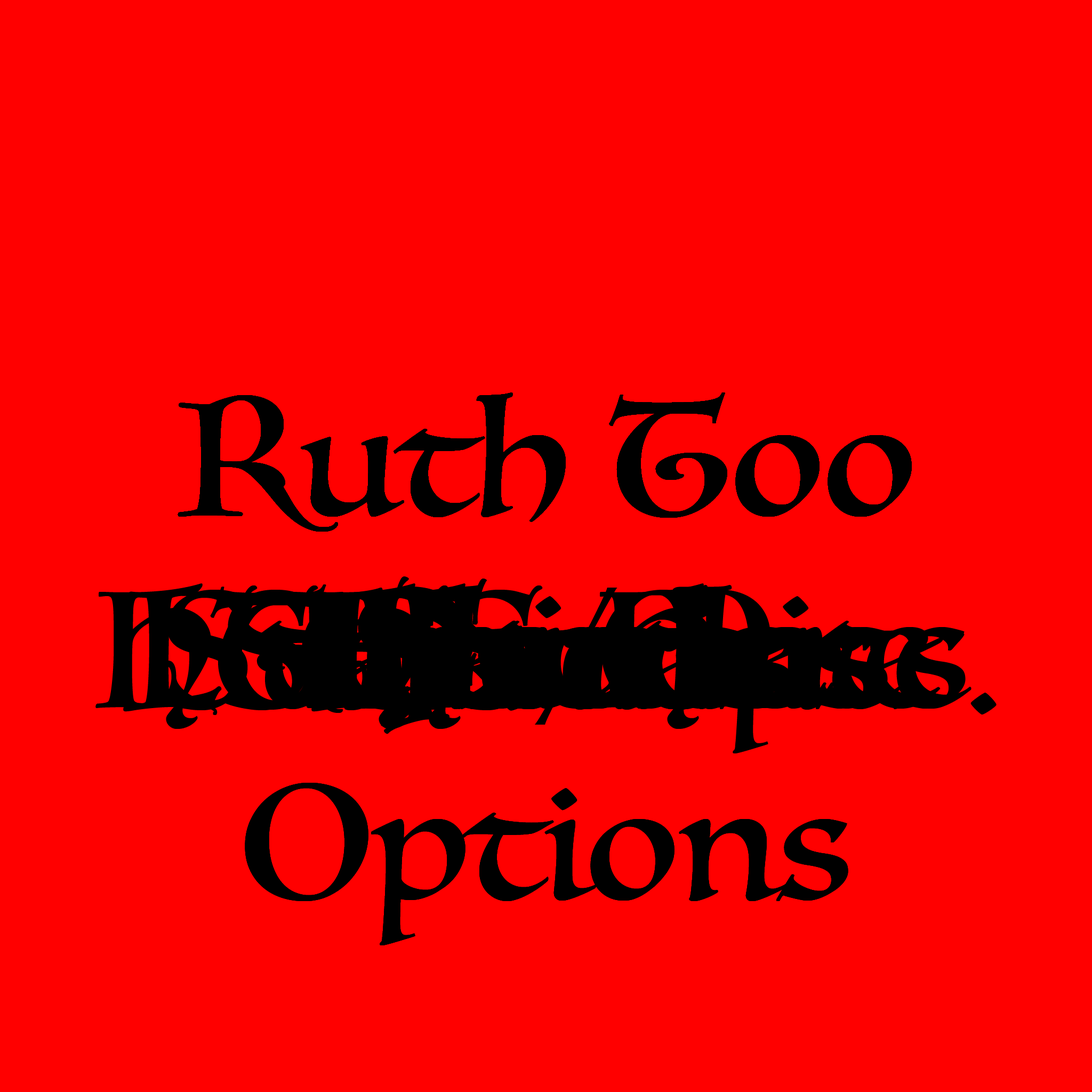
<style>
.page{position:relative;width:1092px;height:1092px;background:#ff0000}
.page>*{position:absolute;margin:0}
.t1{font:160px "Luminari-Regular";color:#000000}
</style>
<div class="page">
<p class="t1" style="left:95px;top:392px;width:902px;height:337px;text-align:center">Ruth Too<br>HUDs/Misc.</p>
<p class="t1" style="left:123px;top:392px;width:843px;height:361px;text-align:center">Ruth Too<br>LSL Scripts</p>
<p class="t1" style="left:160px;top:392px;width:784px;height:337px;text-align:center">Ruth Too<br>Start Here</p>
<p class="t1" style="left:178px;top:392px;width:734px;height:335px;text-align:center">Ruth Too<br>Extras</p>
<p class="t1" style="left:178px;top:392px;width:734px;height:319px;text-align:center">Ruth Too<br>Skins</p>
<p class="t1" style="left:178px;top:392px;width:734px;height:553px;text-align:center">Ruth Too<br>Head<br>Options</p>
<p class="t1" style="left:178px;top:392px;width:734px;height:553px;text-align:center">Ruth Too<br>Hands<br>Options</p>
<p class="t1" style="left:178px;top:392px;width:734px;height:553px;text-align:center">Ruth Too<br>Feet<br>Options</p>
<p class="t1" style="left:178px;top:392px;width:734px;height:335px;text-align:center">Ruth Too<br>Textures</p>
</div>
